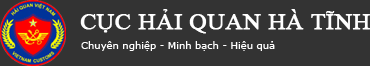
<style>
.page{position:relative;width:370px;height:66px;background:#333333}
.page>*{position:absolute;margin:0}
.t1{font:21.6px "TimesNewRomanPSMT";color:#ffffff;font-weight:bold;scale:1.11 1}
.t2{font:9px "Verdana";color:#ffffff;scale:1.11 1}
</style>
<div class="page">
<p class="t1" style="left:80px;top:9px;width:290px;height:25px">CỤC HẢI QUAN HÀ TĨNH</p>
<p class="t2" style="left:81px;top:41px;width:194px;height:10px">Chuyên nghiệp - Minh bạch - Hiệu quả</p>
</div>
